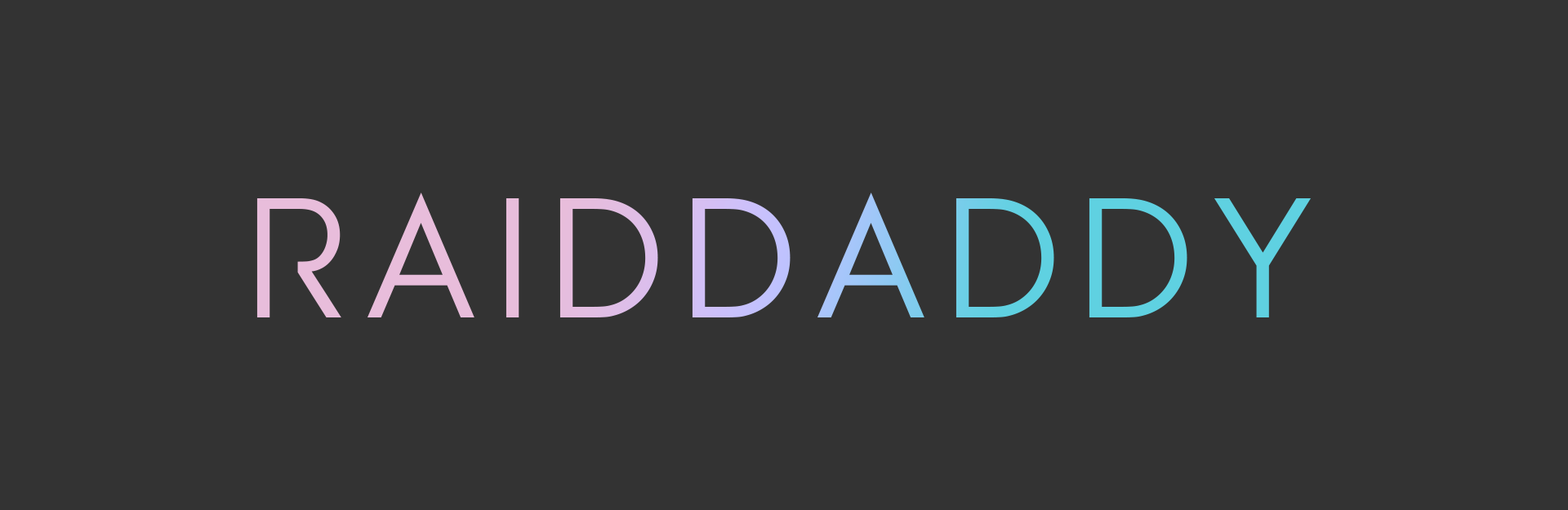
<style>
.page{position:relative;width:1568px;height:510px;background:#333333}
.page>*{position:absolute;margin:0}
.t1{font:163.3px "Pasajero";letter-spacing:0.15em}
</style>
<div class="page">
<p class="t1" style="left:256px;top:193px;width:1055px;height:125px">RaidDaddy</p>
</div>
